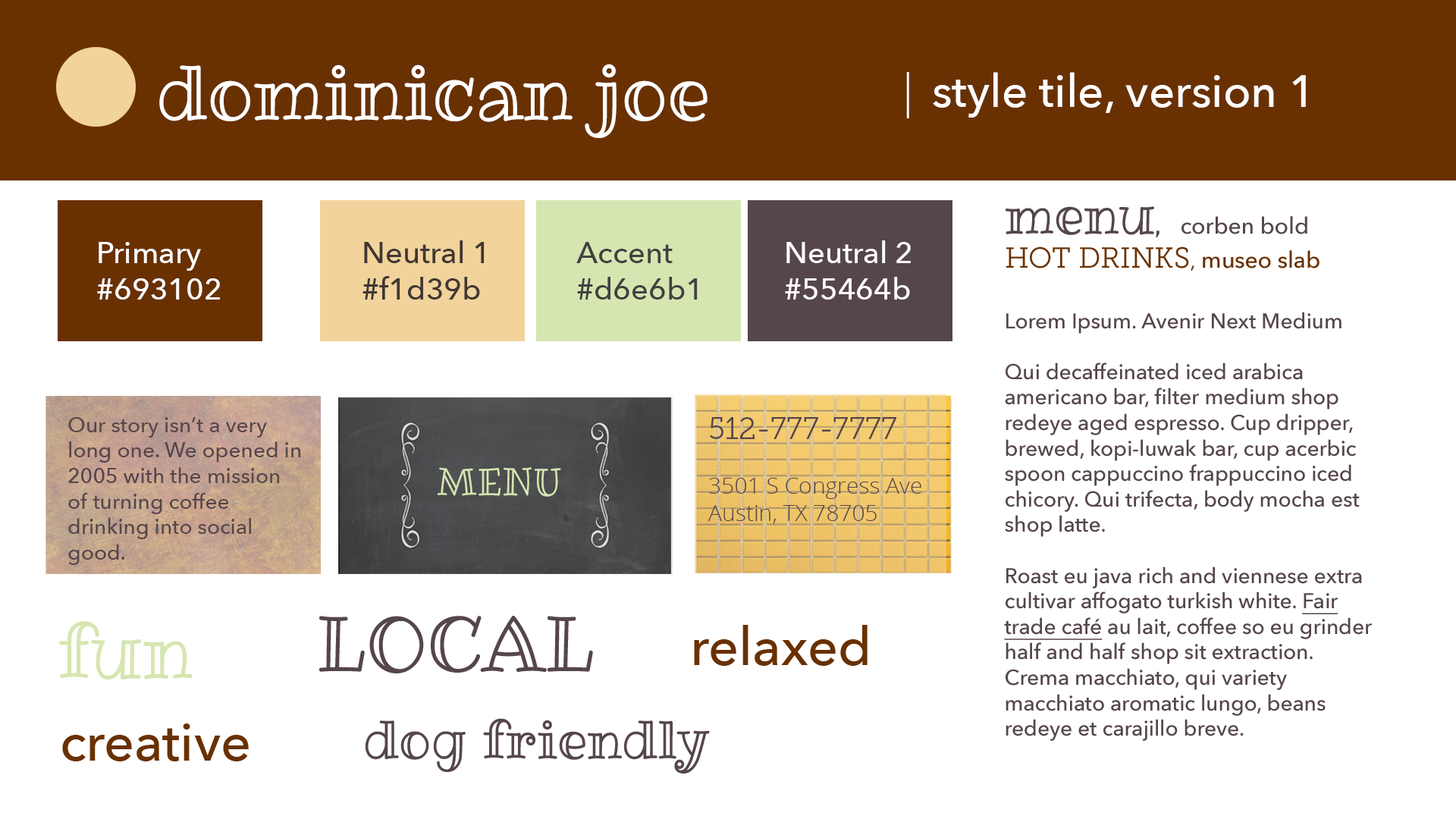
<style>
.page{position:relative;width:1456px;height:819px;background:#ffffff}
.page>*{position:absolute;margin:0}
.t1{font:75.8px "RibeyeMarrow-Regular";color:#ffffff}
.t2{font:45.5px "AvenirNext-Medium";color:#ffffff}
.t3{font:45.5px "OpenSans-Light";color:#ffffff}
.t4{font:21.2px "AvenirNext-Medium";color:#55464b}
.t5{font:53.1px "RibeyeMarrow-Regular";color:#55464b}
.t6{font:53.1px "JuliusSansOne-Regular";color:#55464b}
.t7{font:22.7px "AvenirNext-Medium";color:#55464b}
.t8{font:28.8px "MuseoSlab-300";color:#693102}
.t9{font:22.7px "MuseoSlab-300";color:#693102}
.t10{font:22.7px "AvenirNext-Medium";color:#693102}
.t11{font:21.2px "AvenirNext-Medium";color:#55464b;text-decoration:underline}
.t12{font:21.2px "OpenSans-Light";color:#55464b}
.t13{font:30.3px "AvenirNext-Medium";color:#ffffff}
.t14{font:30.3px "AvenirNext-Medium";color:#413634}
.t15{font:30.3px "AvenirNext-Medium";color:#414141}
.t16{font:22.7px "OpenSans-Light";color:#55464b}
.t17{font:30.3px "MuseoSlab-300";color:#55464b}
.t18{font:37.9px "RibeyeMarrow-Regular";color:#d6e6b1}
.t19{font:75.8px "RibeyeMarrow-Regular";color:#55464b}
.t20{font:75.8px "RibeyeMarrow-Regular";color:#d6e6b1}
.t21{font:53.1px "AvenirNext-Medium";color:#693102}
</style>
<div class="page">
<p class="t1" style="left:159px;top:64px;width:549px;height:74px">dominican joe</p>
<p class="t2" style="left:906px;top:72px;width:400px;height:46px"><span class="t3">| </span>style tile, version 1</p>
<p class="t4" style="left:1004px;top:206px;width:368px;height:535px"><span class="t5">menu</span><span class="t6">, </span><span class="t7">corben bold<br></span><span class="t8">HOT DRINKS</span><span class="t9">, </span><span class="t10">museo slab<br><br></span>Lorem Ipsum. Avenir Next Medium<br><br>Qui decaffeinated iced arabica americano bar, filter medium shop redeye aged espresso. Cup dripper, brewed, kopi-luwak bar, cup acerbic spoon cappuccino frappuccino iced chicory. Qui trifecta, body mocha est shop latte.<br><br>Roast eu java rich and viennese extra cultivar affogato turkish white. <span class="t11">Fair trade café</span> au lait, coffee so eu grinder half and half shop sit extraction. Crema macchiato, qui variety macchiato aromatic lungo, beans redeye et carajillo breve.<br><span class="t12"></span></p>
<p class="t13" style="left:97px;top:242px;width:123px;height:58px">Primary<br>#693102</p>
<p class="t14" style="left:362px;top:240px;width:123px;height:60px">Neutral 1<br>#f1d39b</p>
<p class="t15" style="left:576px;top:242px;width:122px;height:58px">Accent<br>#d6e6b1</p>
<p class="t13" style="left:785px;top:240px;width:126px;height:60px">Neutral 2<br>#55464b</p>
<p class="t4" style="left:68px;top:417px;width:233px;height:148px">Our story isn’t a very long one. We opened in 2005 with the mission of turning coffee drinking into social good.</p>
<p class="t16" style="left:708px;top:417px;width:213px;height:107px"><span class="t17">512-777-7777<br><br></span>3501 S Congress Ave<br>Austin, TX 78705</p>
<p class="t18" style="left:437px;top:467px;width:124px;height:30px">MENU</p>
<p class="t19" style="left:318px;top:616px;width:275px;height:57px">LOCAL</p>
<p class="t20" style="left:59px;top:621px;width:134px;height:58px">fun</p>
<p class="t21" style="left:694px;top:625px;width:174px;height:41px">relaxed</p>
<p class="t21" style="left:62px;top:723px;width:187px;height:38px">creative</p>
<p class="t5" style="left:365px;top:718px;width:345px;height:55px">dog friendly</p>
</div>
